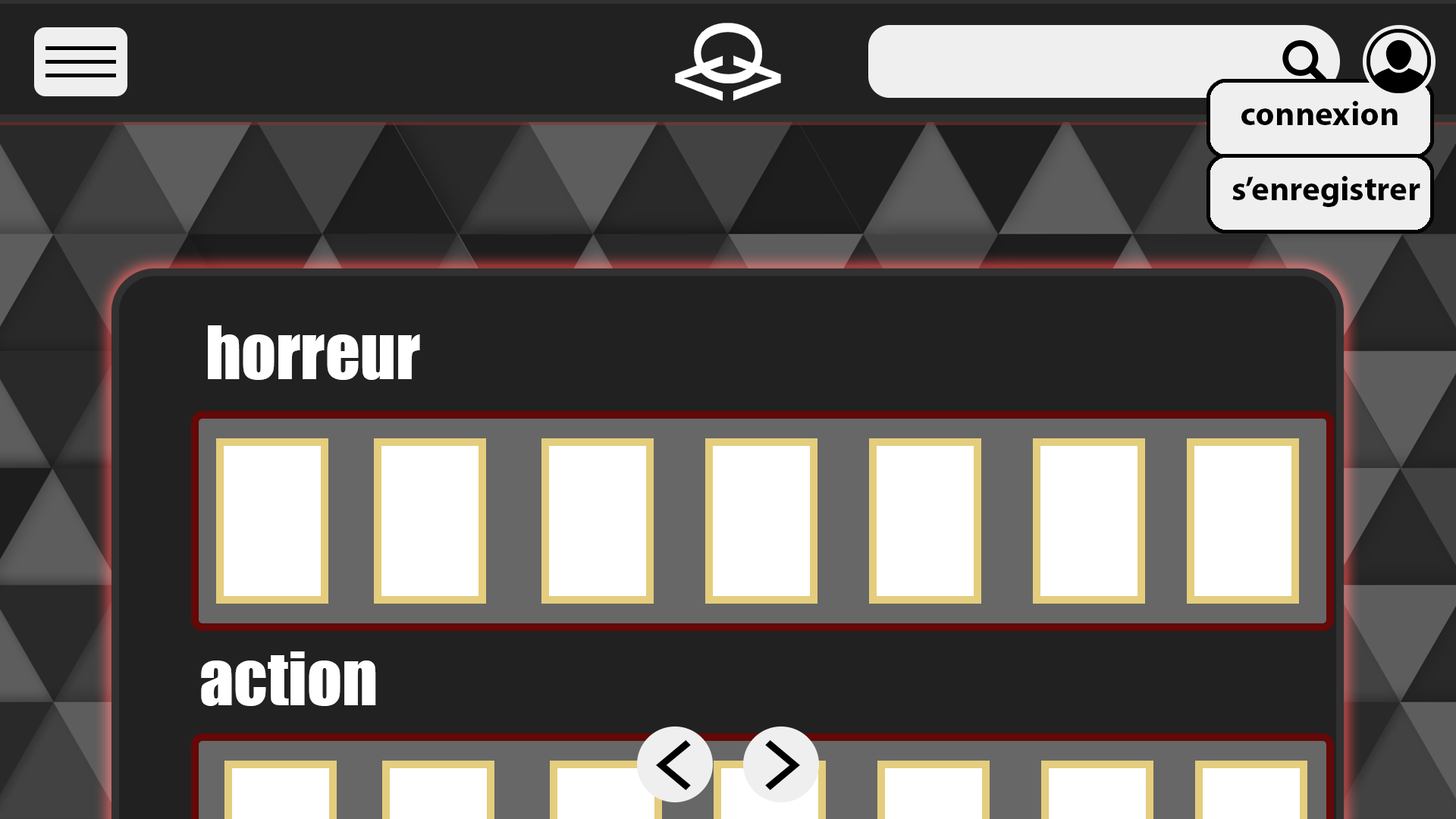
<style>
.page{position:relative;width:1456px;height:819px;background:#212121}
.page>*{position:absolute;margin:0}
.t1{font:34.1px "MyriadPro-Bold";color:#000000}
.t2{font:68.2px "Impact";color:#ffffff}
</style>
<div class="page">
<p class="t1" style="left:1241px;top:101px;width:157px;height:24px">connexion</p>
<p class="t1" style="left:1232px;top:176px;width:188px;height:31px">s’enregistrer</p>
<p class="t2" style="left:208px;top:325px;width:212px;height:55px">horreur</p>
<p class="t2" style="left:201px;top:651px;width:175px;height:55px">action</p>
</div>
